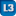
<style>
.page{position:relative;width:16px;height:16px;background:#0074b6}
.page>*{position:absolute;margin:0}
.t1{font:9.5px "BigNoodleTitling";color:#e3e3e3;font-weight:bold;scale:1.62 1}
</style>
<div class="page">
<p class="t1" style="left:3px;top:4px;width:11px;height:8px">L3</p>
</div>
